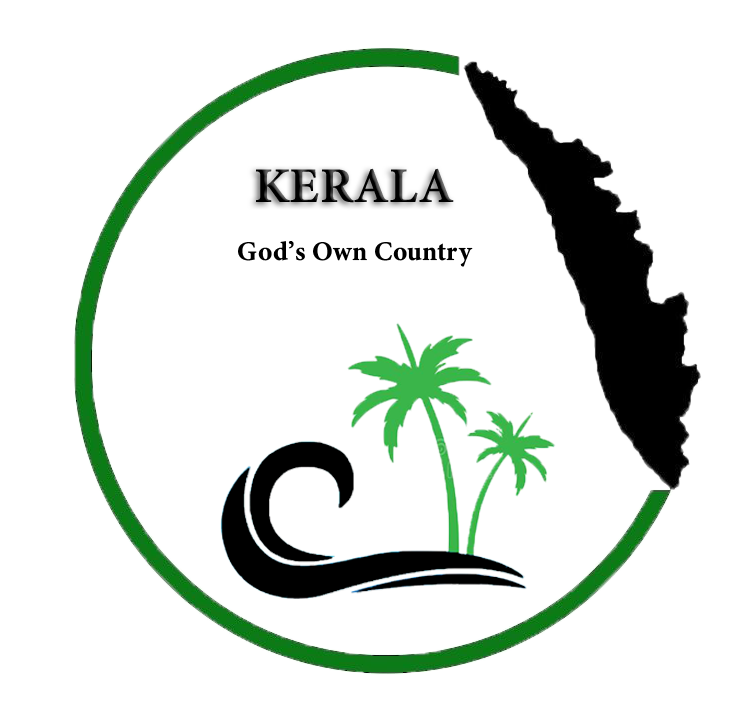
<style>
.page{position:relative;width:730px;height:720px;background:#ffffff}
.page>*{position:absolute;margin:0}
.t1{font:50px "MinionConceptRoman-Bold";color:#000000}
.t2{font:27px "MinionConceptRoman-Bold";color:#000000}
</style>
<div class="page">
<p class="t1" style="left:256px;top:168px;width:198px;height:35px">KERALA</p>
<p class="t2" style="left:238px;top:241px;width:235px;height:26px">God’s Own Country</p>
</div>
